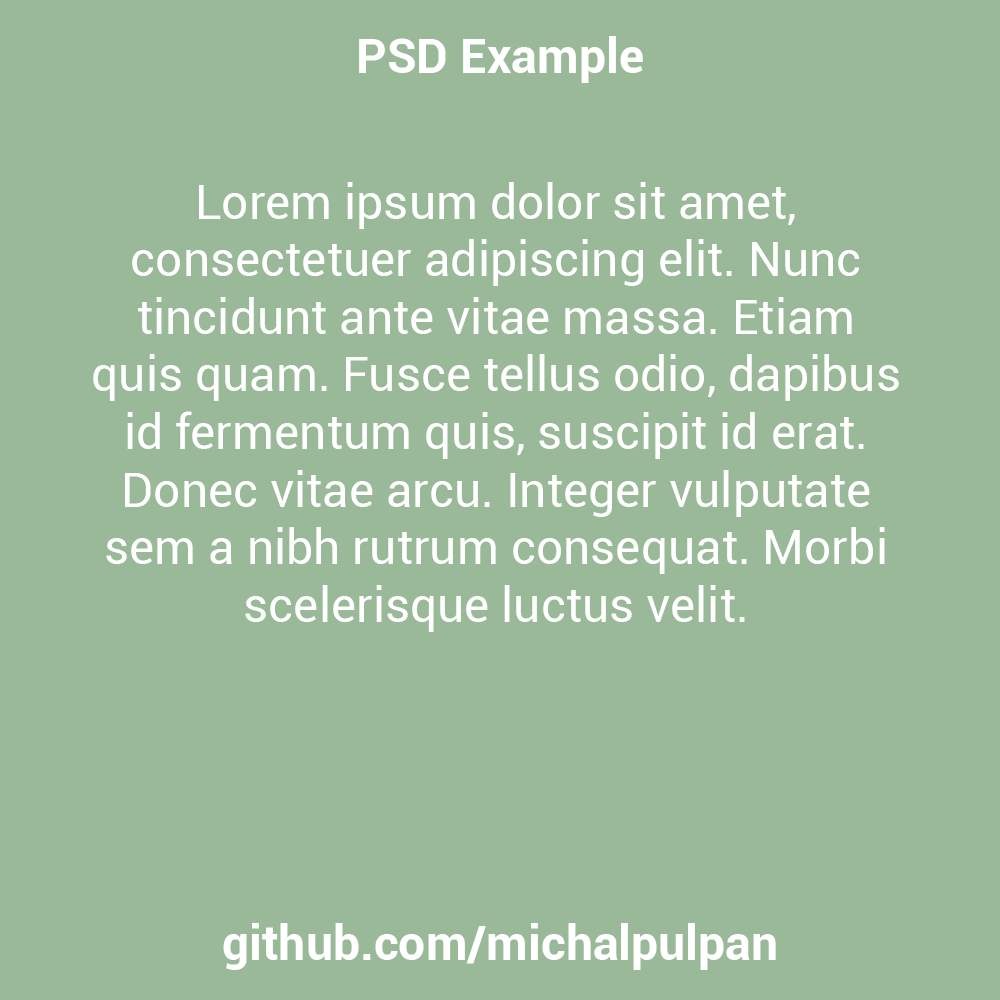
<style>
.page{position:relative;width:1000px;height:1000px;background:#99b998}
.page>*{position:absolute;margin:0}
.t1{font:48px "Roboto-Bold";color:#ffffff}
.t2{font:48px "Roboto-Regular";color:#ffffff}
</style>
<div class="page">
<p class="t1" style="left:359px;top:36px;width:284px;height:47px">PSD Example</p>
<p class="t2" style="left:93px;top:182px;width:806px;height:450px;text-align:center">Lorem ipsum dolor sit amet, consectetuer adipiscing elit. Nunc tincidunt ante vitae massa. Etiam quis quam. Fusce tellus odio, dapibus id fermentum quis, suscipit id erat. Donec vitae arcu. Integer vulputate sem a nibh rutrum consequat. Morbi scelerisque luctus velit.</p>
<p class="t1" style="left:223px;top:923px;width:553px;height:47px">github.com/michalpulpan</p>
</div>
